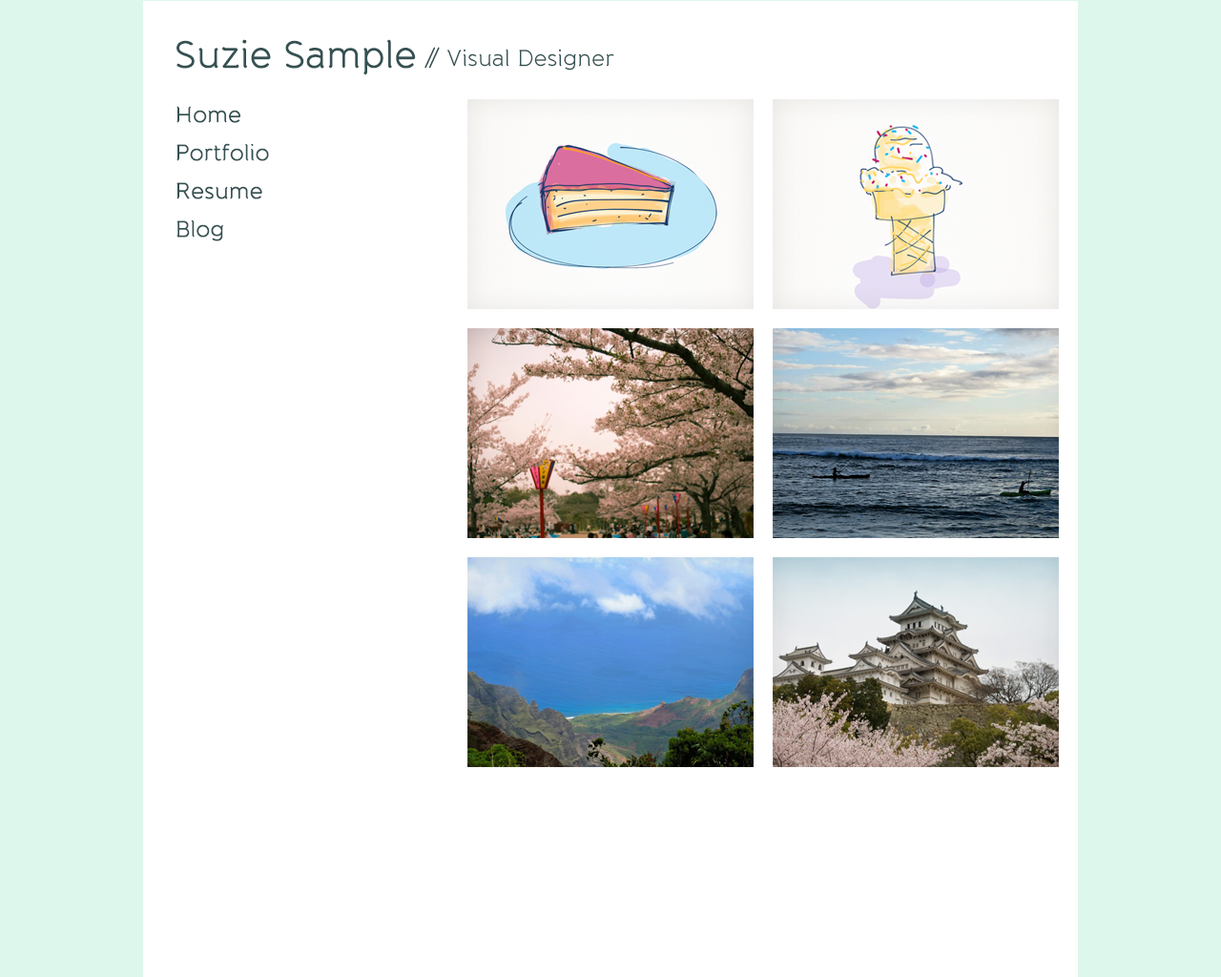
<style>
.page{position:relative;width:1221px;height:977px;background:#ffffff}
.page>*{position:absolute;margin:0}
.t1{font:38.4px "BandaRegular";color:#355152}
.t2{font:22.9px "BandaRegular";color:#355152}
</style>
<div class="page">
<p class="t1" style="left:176px;top:39px;width:240px;height:36px">Suzie Sample</p>
<p class="t2" style="left:424px;top:47px;width:190px;height:24px">// Visual Designer</p>
<p class="t2" style="left:176px;top:106px;width:64px;height:17px">Home</p>
<p class="t2" style="left:176px;top:143px;width:93px;height:18px">Portfolio</p>
<p class="t2" style="left:176px;top:182px;width:86px;height:17px">Resume</p>
<p class="t2" style="left:176px;top:219px;width:47px;height:22px">Blog</p>
</div>
